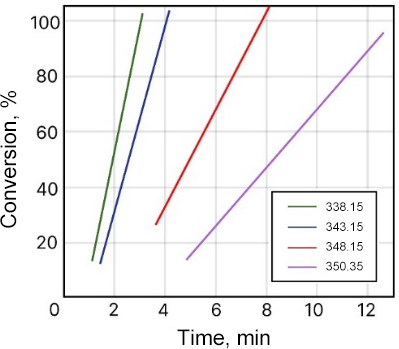
<style>
.page{position:relative;width:399px;height:349px;background:#ffffff}
.page>*{position:absolute;margin:0}
.t1{font:21.4px "ArialMT";color:#000000}
.t2{font:12.2px "ArialMT";color:#000000}
</style>
<div class="page">
<p class="t1" style="left:0px;top:91px;width:20px;height:137px;rotate:-90deg">Conversion, %</p>
<p class="t2" style="left:326px;top:202px;width:37px;height:69px;text-align:center">338.15<br>343.15<br>348.15<br>350.35</p>
<p class="t1" style="left:177px;top:329px;width:93px;height:20px">Time, min</p>
</div>
